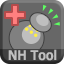
<style>
.page{position:relative;width:64px;height:64px;background:#676767}
.page>*{position:absolute;margin:0}
.t1{font:13.2px "Meiryo-Bold";color:#c0c0c0;scale:0.89 1}
</style>
<div class="page">
<p class="t1" style="left:8px;top:49px;width:49px;height:12px">NH Tool</p>
</div>
